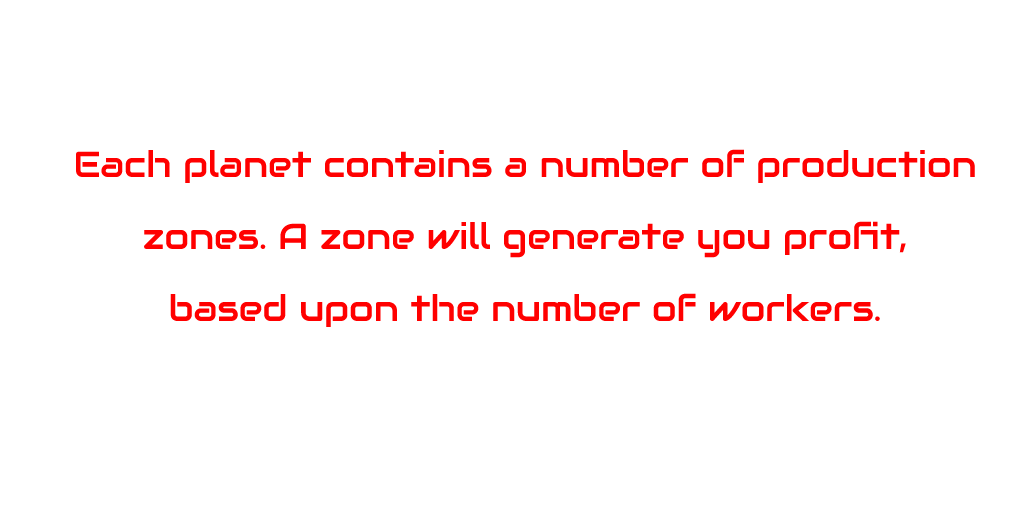
<style>
.page{position:relative;width:1024px;height:512px;background:#ffffff}
.page>*{position:absolute;margin:0}
.t1{font:36px/72px "Audiowide-Regular";color:#ff0000}
</style>
<div class="page">
<p class="t1" style="left:76px;top:149px;width:899px;height:178px;text-align:center">Each planet contains a number of production<br>zones. A zone will generate you profit,<br>based upon the number of workers.</p>
</div>
